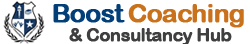
<style>
.page{position:relative;width:250px;height:44px;background:#ffffff}
.page>*{position:absolute;margin:0}
.t1{font:25.5px "ArialRoundedMTBold";letter-spacing:-0.04em;color:#023f78;font-weight:bold}
.t2{font:25.5px "ArialRoundedMTBold";letter-spacing:-0.04em;color:#ca711b;font-weight:bold}
.t3{font:17.6px "ArialRoundedMTBold";letter-spacing:-0.04em;color:#3f3f3f;font-weight:bold}
</style>
<div class="page">
<p class="t1" style="left:53px;top:4px;width:72px;height:19px">Boost</p>
<p class="t2" style="left:128px;top:4px;width:116px;height:24px">Coaching</p>
<p class="t3" style="left:69px;top:28px;width:163px;height:18px">&amp; Consultancy Hub</p>
</div>
